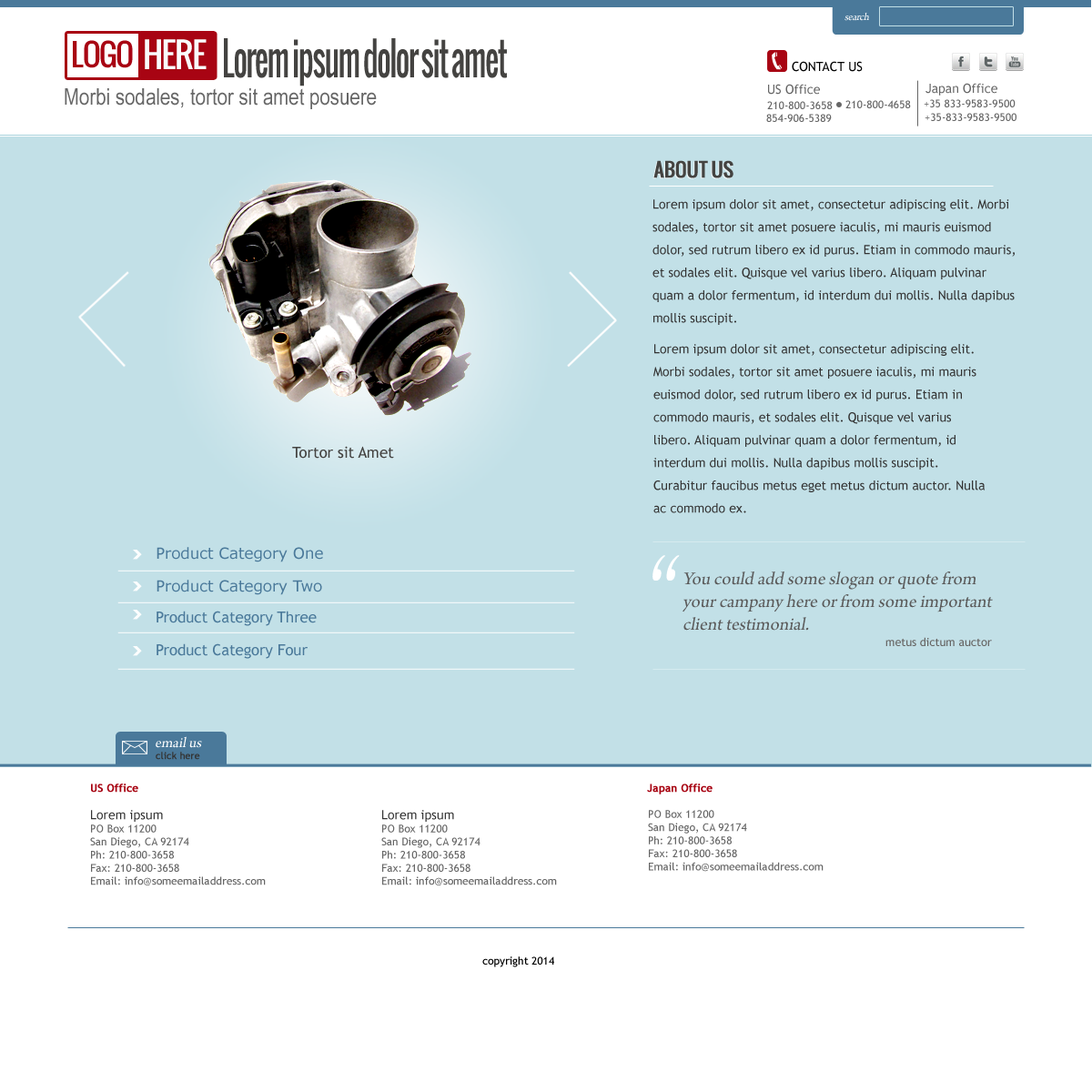
<style>
.page{position:relative;width:1092px;height:1092px;background:#c2e0e7}
.page>*{position:absolute;margin:0}
.t1{font:10.9px "ArnoPro-Regular";letter-spacing:-0.025em;color:#ffffff;font-style:italic}
.t2{font:30.3px "Oswald";letter-spacing:-0.05em;color:#a80413}
.t3{font:34.1px "Oswald";letter-spacing:-0.05em;color:#f9fcfc}
.t4{font:44.6px "Oswald";letter-spacing:-0.05em;color:#444341;scale:0.68 1}
.t5{font:12.7px "TrebuchetMS";color:#000000}
.t6{font:22.7px "ArialNarrow";color:#666666}
.t7{font:12.7px "TrebuchetMS";color:#666666}
.t8{font:10.9px "TrebuchetMS";color:#666666}
.t9{font:19px "Oswald";letter-spacing:-0.025em;color:#444341;font-weight:bold}
.t10{font:12.7px/22.7px "TrebuchetMS";color:#333333}
.t11{font:15.2px "TrebuchetMS";color:#444341}
.t12{font:15.2px "Verdana";color:#4a799a}
.t13{font:113.7px "BirchStd";color:#ffffff;font-style:italic}
.t14{font:19px/22.7px "ArnoPro-Regular";color:#5a5a5a;font-style:italic}
.t15{font:15.2px "TrebuchetMS";color:#4a799a}
.t16{font:11.4px "TrebuchetMS";color:#676665}
.t17{font:15.2px "ArnoPro-Regular";color:#ffffff;font-style:italic}
.t18{font:9.5px "TrebuchetMS";color:#333333;font-weight:bold}
.t19{font:10.9px "TrebuchetMS";color:#a80413;font-weight:bold}
.t20{font:10.9px "TrebuchetMS";color:#020202}
</style>
<div class="page">
<p class="t1" style="left:844px;top:12px;width:25px;height:9px">search</p>
<p class="t2" style="left:73px;top:40px;width:60px;height:28px">LOGO</p>
<p class="t3" style="left:145px;top:39px;width:62px;height:30px">HERE</p>
<p class="t4" style="left:224px;top:38px;width:283px;height:48px">Lorem ipsum dolor sit amet</p>
<p class="t5" style="left:792px;top:61px;width:71px;height:11px">CONTACT US</p>
<p class="t6" style="left:65px;top:88px;width:312px;height:21px">Morbi sodales, tortor sit amet posuere</p>
<p class="t7" style="left:768px;top:84px;width:52px;height:11px">US Office</p>
<p class="t7" style="left:925px;top:83px;width:72px;height:13px">Japan Office</p>
<p class="t8" style="left:767px;top:101px;width:66px;height:8px">210-800-3658</p>
<p class="t8" style="left:845px;top:100px;width:66px;height:8px">210-800-4658</p>
<p class="t8" style="left:924px;top:99px;width:92px;height:8px">+35 833-9583-9500</p>
<p class="t8" style="left:766px;top:114px;width:66px;height:8px">854-906-5389</p>
<p class="t8" style="left:925px;top:113px;width:91px;height:8px">+35-833-9583-9500</p>
<p class="t9" style="left:653px;top:160px;width:80px;height:18px">ABOUT US</p>
<p class="t10" style="left:652px;top:199px;width:363px;height:126px">Lorem ipsum dolor sit amet, consectetur adipiscing elit. Morbi sodales, tortor sit amet posuere iaculis, mi mauris euismod dolor, sed rutrum libero ex id purus. Etiam in commodo mauris, et sodales elit. Quisque vel varius libero. Aliquam pulvinar quam a dolor fermentum, id interdum dui mollis. Nulla dapibus mollis suscipit.</p>
<p class="t10" style="left:653px;top:344px;width:332px;height:169px">Lorem ipsum dolor sit amet, consectetur adipiscing elit. Morbi sodales, tortor sit amet posuere iaculis, mi mauris euismod dolor, sed rutrum libero ex id purus. Etiam in commodo mauris, et sodales elit. Quisque vel varius libero. Aliquam pulvinar quam a dolor fermentum, id interdum dui mollis. Nulla dapibus mollis suscipit. Curabitur faucibus metus eget metus dictum auctor. Nulla ac commodo ex.</p>
<p class="t11" style="left:292px;top:446px;width:102px;height:13px">Tortor sit Amet</p>
<p class="t12" style="left:157px;top:547px;width:166px;height:15px">Product Category One</p>
<p class="t13" style="left:652px;top:555px;width:28px;height:26px">“</p>
<p class="t12" style="left:157px;top:580px;width:165px;height:15px">Product Category Two</p>
<p class="t14" style="left:682px;top:571px;width:311px;height:60px">You could add some slogan or quote from <br>your campany here or from some important <br>client testimonial.</p>
<p class="t15" style="left:157px;top:611px;width:160px;height:15px">Product Category Three</p>
<p class="t16" style="left:885px;top:637px;width:107px;height:9px">metus dictum auctor</p>
<p class="t15" style="left:157px;top:643px;width:151px;height:16px">Product Category Four</p>
<p class="t17" style="left:156px;top:736px;width:46px;height:12px">email us</p>
<p class="t18" style="left:156px;top:752px;width:44px;height:8px">click here</p>
<p class="t19" style="left:91px;top:783px;width:47px;height:10px">US Office</p>
<p class="t19" style="left:647px;top:783px;width:66px;height:11px">Japan Office</p>
<p class="t8" style="left:90px;top:810px;width:176px;height:75px"><span class="t10">Lorem ipsum <br></span>PO Box 11200<br>San Diego, CA 92174<br>Ph: 210-800-3658<br>Fax: 210-800-3658<br>Email: info@someemailaddress.com</p>
<p class="t8" style="left:381px;top:810px;width:176px;height:75px"><span class="t10">Lorem ipsum <br></span>PO Box 11200<br>San Diego, CA 92174<br>Ph: 210-800-3658<br>Fax: 210-800-3658<br>Email: info@someemailaddress.com</p>
<p class="t8" style="left:648px;top:810px;width:176px;height:62px">PO Box 11200<br>San Diego, CA 92174<br>Ph: 210-800-3658<br>Fax: 210-800-3658<br>Email: info@someemailaddress.com</p>
<p class="t20" style="left:482px;top:956px;width:72px;height:11px">copyright 2014</p>
</div>
